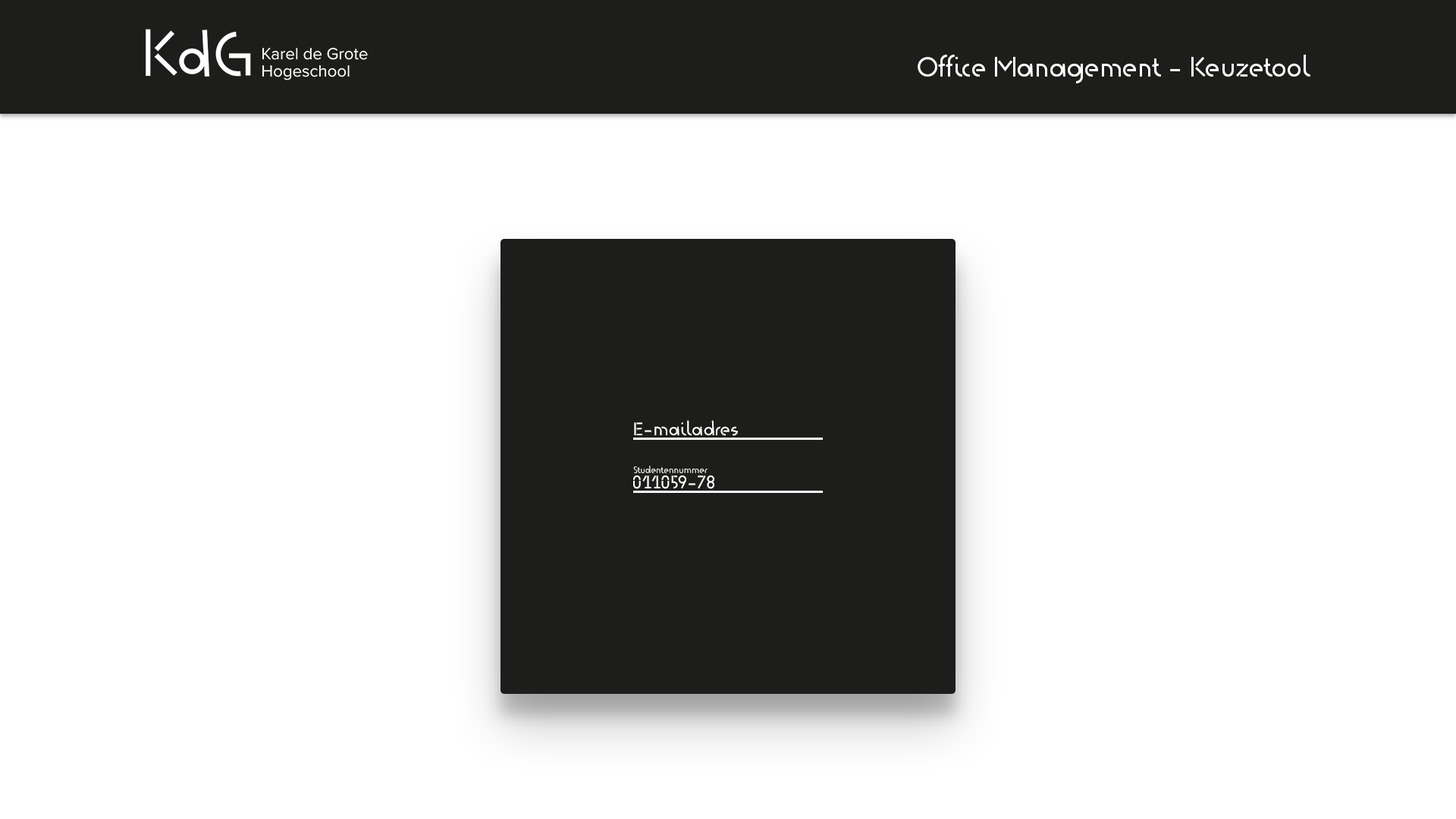
<style>
.page{position:relative;width:1456px;height:819px;background:#ffffff}
.page>*{position:absolute;margin:0}
.t1{font:27.3px "KdG-Regular";color:#fefefe}
.t2{font:18.2px "KdG-Regular";color:#ffffff}
.t3{font:9.1px "KdG-Regular";color:#ffffff}
</style>
<div class="page">
<p class="t1" style="left:918px;top:55px;width:392px;height:28px">Office Management - Keuzetool</p>
<p class="t2" style="left:634px;top:420px;width:104px;height:16px">E-mailadres</p>
<p class="t3" style="left:633px;top:466px;width:75px;height:7px">Studentennummer</p>
<p class="t2" style="left:633px;top:475px;width:81px;height:14px">011059-78</p>
</div>
